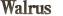
<style>
.page{position:relative;width:63px;height:16px;background:#ffffff}
.page>*{position:absolute;margin:0}
.t1{font:18px "RyuminPro-ExBold";letter-spacing:-0.08em;color:#4a3f32;font-weight:bold;scale:0.9 1}
</style>
<div class="page">
<p class="t1" style="left:0px;top:0px;width:52px;height:15px">Walrus</p>
</div>
